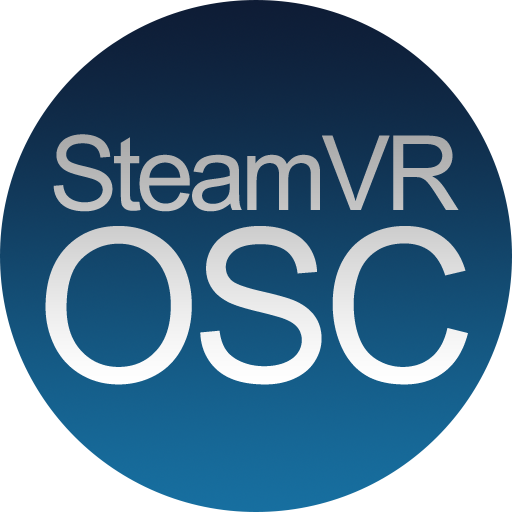
<style>
.page{position:relative;width:512px;height:512px;background:#ffffff}
.page>*{position:absolute;margin:0}
.t1{font:103.4px "ArialMT";letter-spacing:-0.05em;color:#b8b8b8}
.t2{font:213.8px "ArialMT";letter-spacing:-0.05em;color:#ebebeb}
</style>
<div class="page">
<p class="t1" style="left:53px;top:134px;width:406px;height:78px">SteamVR</p>
<p class="t2" style="left:45px;top:226px;width:423px;height:159px">OSC</p>
</div>
